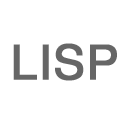
<style>
.page{position:relative;width:124px;height:124px;background:#ffffff}
.page>*{position:absolute;margin:0}
.t1{font:48px "Helvetica";color:#666666;font-weight:bold}
</style>
<div class="page">
<p class="t1" style="left:13px;top:43px;width:104px;height:38px">LISP</p>
</div>
